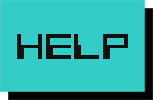
<style>
.page{position:relative;width:153px;height:100px;background:#33ccc7}
.page>*{position:absolute;margin:0}
.t1{font:28.4px "G7-Silkworm-TTF";color:#111111}
</style>
<div class="page">
<p class="t1" style="left:17px;top:34px;width:111px;height:25px">HELP</p>
</div>
